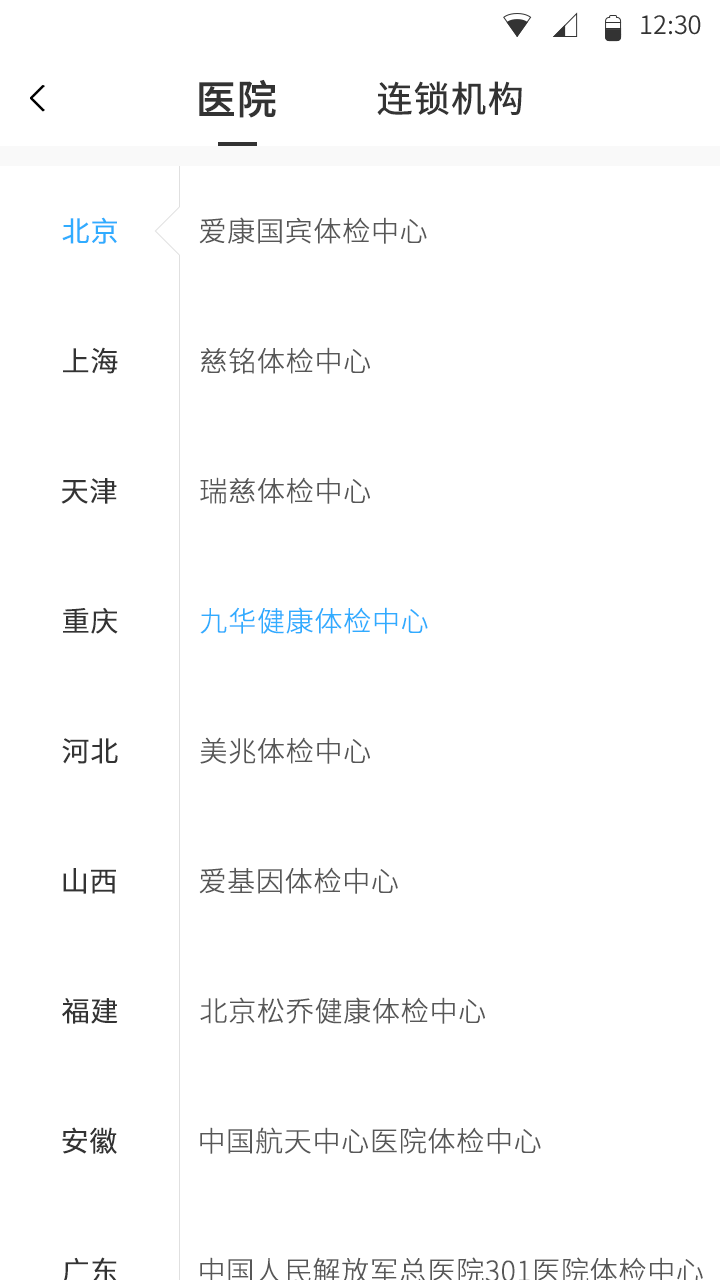
<style>
.page{position:relative;width:720px;height:1280px;background:#ffffff}
.page>*{position:absolute;margin:0}
.t1{font:25.4px "SourceHanSansCN-Normal";color:#333333}
.t2{font:40px "SourceHanSansCN-Medium";color:#333333;font-weight:bold}
.t3{font:36px "SourceHanSansCN-Regular";color:#333333;font-weight:bold}
.t4{font:28px "SourceHanSansCN-Normal";color:#30acff;font-weight:bold}
.t5{font:28px "SourceHanSansCN-Light";color:#575757;font-weight:bold}
.t6{font:28px "SourceHanSansCN-Normal";color:#333333;font-weight:bold}
.t7{font:28px "SourceHanSansCN-Light";color:#30acff;font-weight:bold}
</style>
<div class="page">
<p class="t1" style="left:641px;top:15px;width:60px;height:20px">12:30</p>
<p class="t2" style="left:199px;top:79px;width:77px;height:39px">医院</p>
<p class="t3" style="left:377px;top:81px;width:145px;height:34px">连锁机构</p>
<p class="t4" style="left:62px;top:217px;width:55px;height:27px">北京</p>
<p class="t5" style="left:199px;top:217px;width:228px;height:27px">爱康国宾体检中心</p>
<p class="t6" style="left:63px;top:347px;width:55px;height:27px">上海</p>
<p class="t5" style="left:201px;top:347px;width:169px;height:27px">慈铭体检中心</p>
<p class="t6" style="left:61px;top:478px;width:56px;height:26px">天津</p>
<p class="t5" style="left:200px;top:477px;width:170px;height:27px">瑞慈体检中心</p>
<p class="t6" style="left:63px;top:607px;width:55px;height:27px">重庆</p>
<p class="t7" style="left:200px;top:607px;width:228px;height:27px">九华健康体检中心</p>
<p class="t5" style="left:200px;top:737px;width:170px;height:27px">美兆体检中心</p>
<p class="t6" style="left:62px;top:738px;width:56px;height:26px">河北</p>
<p class="t6" style="left:63px;top:868px;width:53px;height:26px">山西</p>
<p class="t5" style="left:199px;top:867px;width:199px;height:27px">爱基因体检中心</p>
<p class="t6" style="left:62px;top:998px;width:56px;height:26px">福建</p>
<p class="t5" style="left:200px;top:997px;width:285px;height:27px">北京松乔健康体检中心</p>
<p class="t6" style="left:62px;top:1127px;width:55px;height:27px">安徽</p>
<p class="t5" style="left:200px;top:1127px;width:341px;height:27px">中国航天中心医院体检中心</p>
</div>
